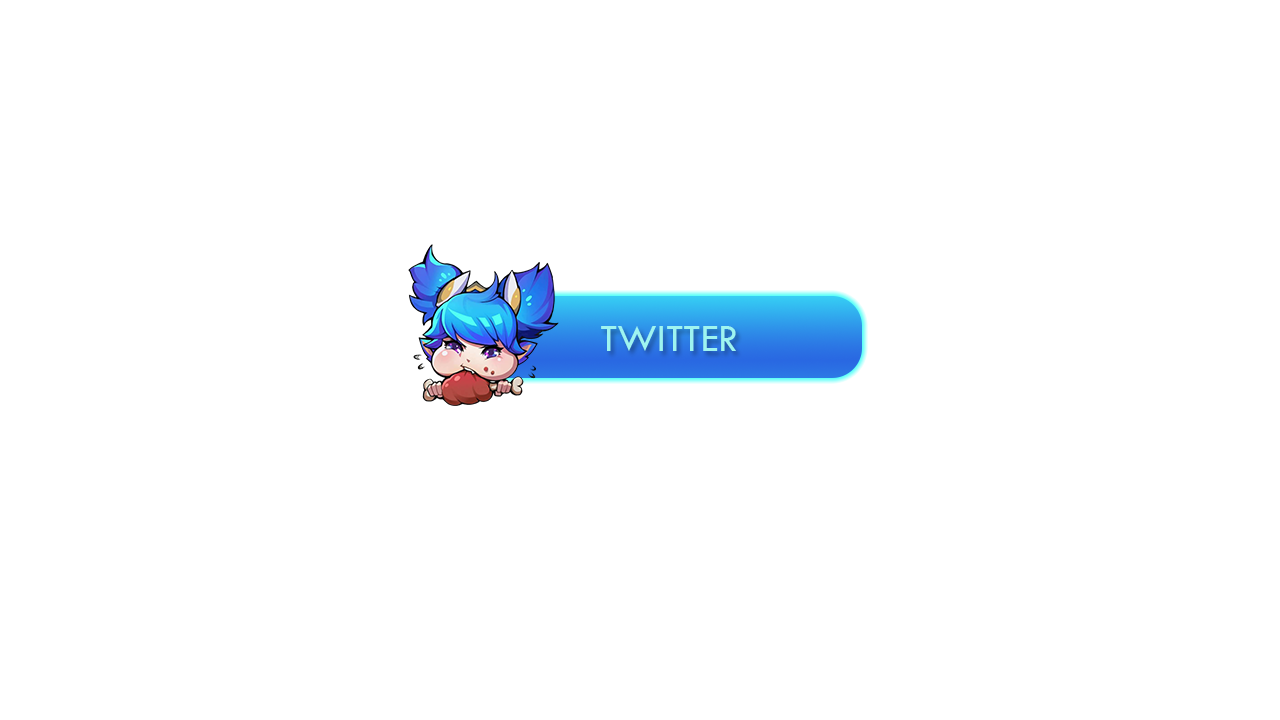
<style>
.page{position:relative;width:1280px;height:720px;background:#ffffff}
.page>*{position:absolute;margin:0}
.t1{font:40px "TwCenMT-Regular";color:#9ef4f0}
</style>
<div class="page">
<p class="t1" style="left:601px;top:326px;width:135px;height:25px">TWITTER</p>
</div>
